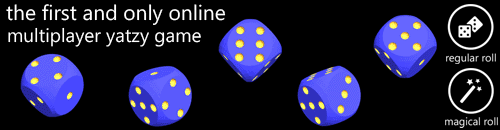
<style>
.page{position:relative;width:500px;height:130px;background:#000000}
.page>*{position:absolute;margin:0}
.t1{font:21px "SegoeWP";color:#ffffff}
.t2{font:19px "SegoeWP";color:#ffffff}
</style>
<div class="page">
<p class="t1" style="left:6px;top:4px;width:220px;height:21px">the first and only online</p>
<p class="t2" style="left:8px;top:27px;width:193px;height:20px">multiplayer yatzy game</p>
</div>
